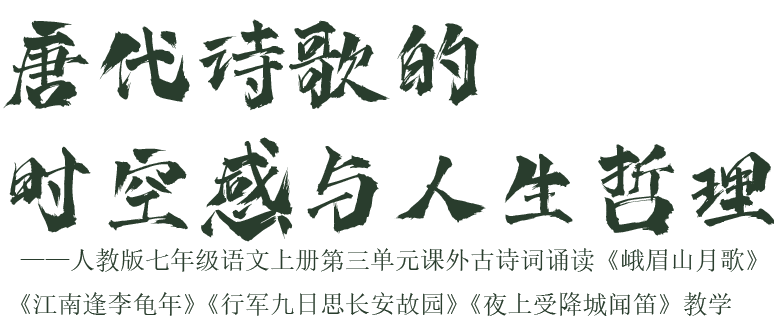
<style>
.page{position:relative;width:774px;height:326px;background:#ffffff}
.page>*{position:absolute;margin:0}
.t1{font:100px "Î´¶¨Òå";color:#293d2d}
.t2{font:25px "SimSun";color:#293d2d}
</style>
<div class="page">
<p class="t1" style="left:3px;top:19px;width:476px;height:92px">唐代诗歌的</p>
<p class="t1" style="left:9px;top:137px;width:766px;height:105px">时空感与人生哲理</p>
<p class="t2" style="left:20px;top:248px;width:737px;height:68px">——人教版七年级语文上册第三单元课外古诗词诵读《峨眉山月歌》<br>《江南逢李龟年》《行军九日思长安故园》《夜上受降城闻笛》教学</p>
</div>
